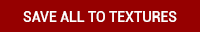
<style>
.page{position:relative;width:200px;height:32px;background:#960000}
.page>*{position:absolute;margin:0}
.t1{font:14px "Roboto-Medium";color:#ffffff}
</style>
<div class="page">
<p class="t1" style="left:23px;top:11px;width:154px;height:11px">SAVE ALL TO TEXTURES</p>
</div>
